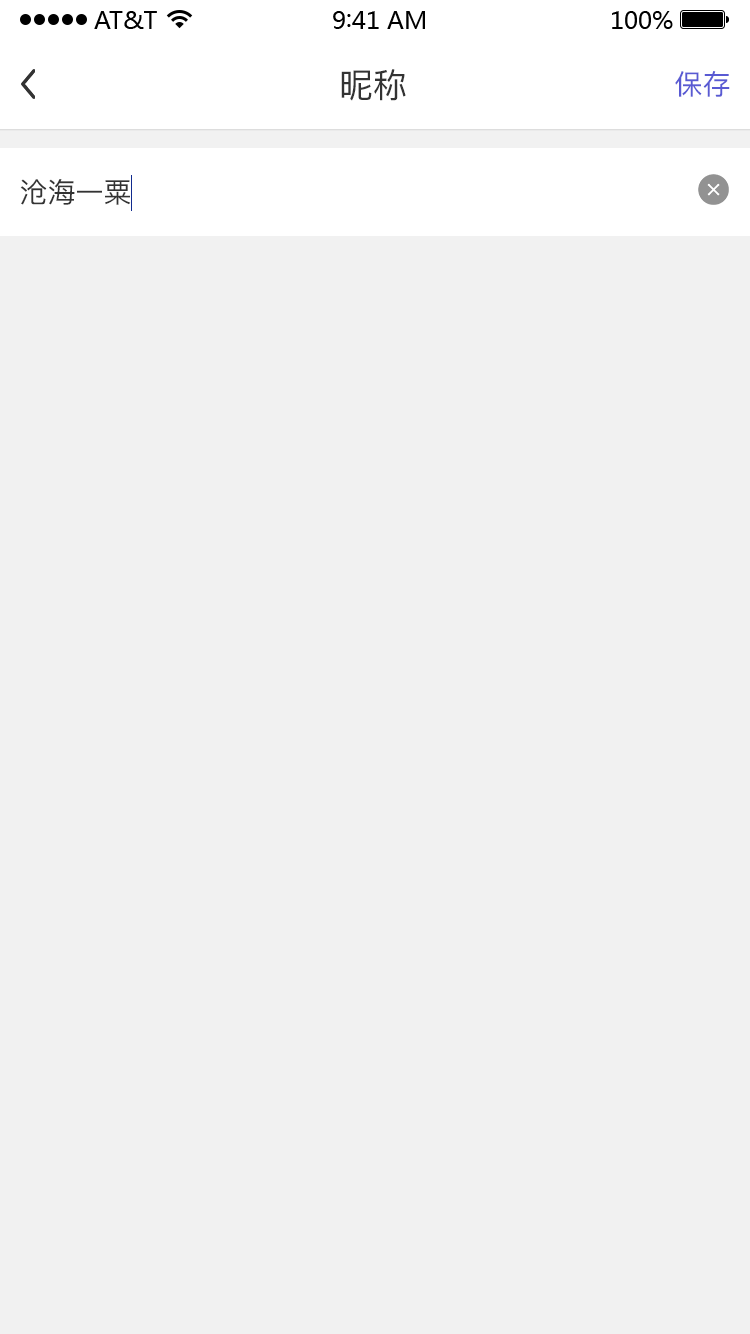
<style>
.page{position:relative;width:750px;height:1334px;background:#f1f1f1}
.page>*{position:absolute;margin:0}
.t1{font:34px "PingFang-SC-Medium";color:#333333}
.t2{font:28px "PingFang-SC-Medium";color:#595ad3}
.t3{font:28px "PingFang-SC-Medium";color:#333333}
</style>
<div class="page">
<p class="t1" style="left:341px;top:69px;width:65px;height:32px">昵称</p>
<p class="t2" style="left:675px;top:71px;width:55px;height:26px">保存</p>
<p class="t3" style="left:20px;top:179px;width:111px;height:26px">沧海一粟</p>
</div>
